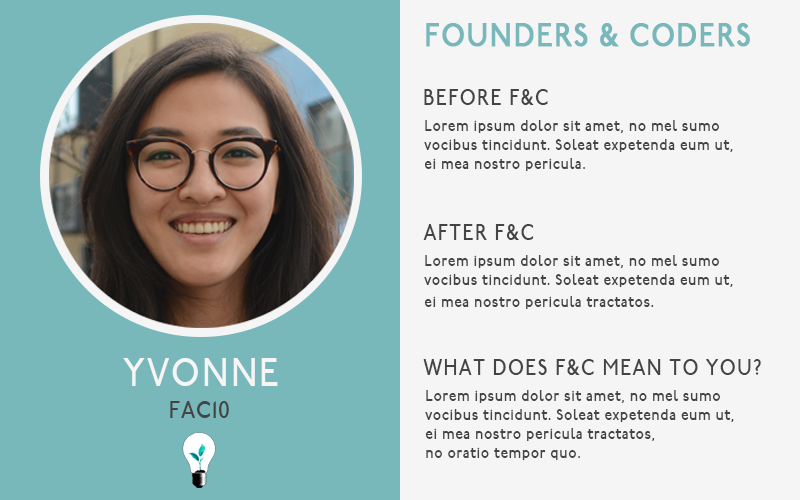
<style>
.page{position:relative;width:800px;height:500px;background:#f5f5f5}
.page>*{position:absolute;margin:0}
.t1{font:32px "P22UndergroundMedium";letter-spacing:0.05em;color:#78b7ba;font-weight:bold;scale:0.86 1}
.t2{font:22px "P22UndergroundMedium";letter-spacing:0.075em;color:#444444;scale:0.86 1}
.t3{font:16px "P22UndergroundMedium";letter-spacing:0.05em;color:#444444;scale:0.86 1}
.t4{font:40px "P22UndergroundMedium";letter-spacing:0.05em;color:#f5f5f5;scale:0.86 1}
.t5{font:24px "P22UndergroundMedium";letter-spacing:0.05em;color:#444444;scale:0.86 1}
</style>
<div class="page">
<p class="t1" style="left:426px;top:23px;width:324px;height:24px">FOUNDERS &amp; CODERS</p>
<p class="t2" style="left:424px;top:89px;width:124px;height:16px">BEFORE F&amp;C</p>
<p class="t3" style="left:424px;top:120px;width:309px;height:51px">Lorem ipsum dolor sit amet, no mel sumo <br>vocibus tincidunt. Soleat expetenda eum ut, <br>ei mea nostro pericula.</p>
<p class="t2" style="left:423px;top:224px;width:111px;height:16px">AFTER F&amp;C</p>
<p class="t3" style="left:424px;top:255px;width:309px;height:54px">Lorem ipsum dolor sit amet, no mel sumo <br>vocibus tincidunt. Soleat expetenda eum ut, <br>ei mea nostro pericula tractatos.</p>
<p class="t4" style="left:123px;top:358px;width:155px;height:28px">YVONNE</p>
<p class="t2" style="left:423px;top:359px;width:338px;height:16px">WHAT DOES F&amp;C MEAN TO YOU?</p>
<p class="t3" style="left:425px;top:390px;width:309px;height:70px">Lorem ipsum dolor sit amet, no mel sumo <br>vocibus tincidunt. Soleat expetenda eum ut, <br>ei mea nostro pericula tractatos, <br>no oratio tempor quo.</p>
<p class="t5" style="left:170px;top:401px;width:59px;height:17px">FAC10</p>
</div>
